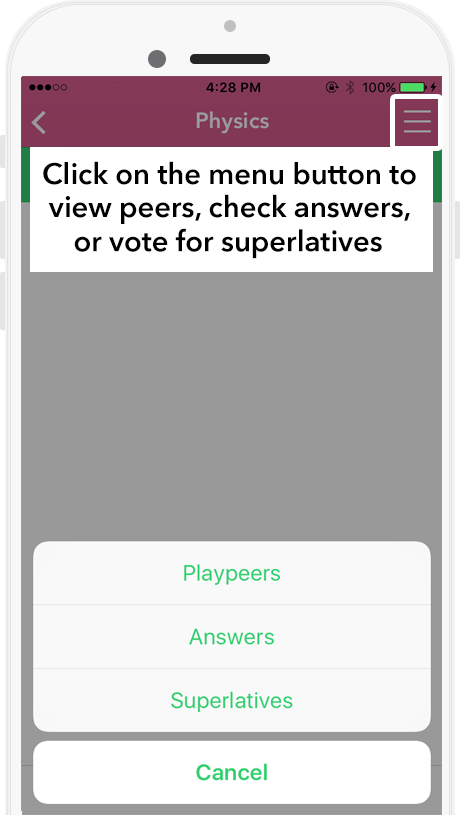
<style>
.page{position:relative;width:460px;height:815px;background:#999999}
.page>*{position:absolute;margin:0}
.t1{font:29.2px "AvenirNext-DemiBold";color:#000000}
</style>
<div class="page">
<p class="t1" style="left:43px;top:161px;width:373px;height:24px">Click on the menu button to</p>
<p class="t1" style="left:48px;top:194px;width:362px;height:30px">view peers, check answers,</p>
<p class="t1" style="left:74px;top:228px;width:308px;height:31px">or vote for superlatives</p>
</div>
